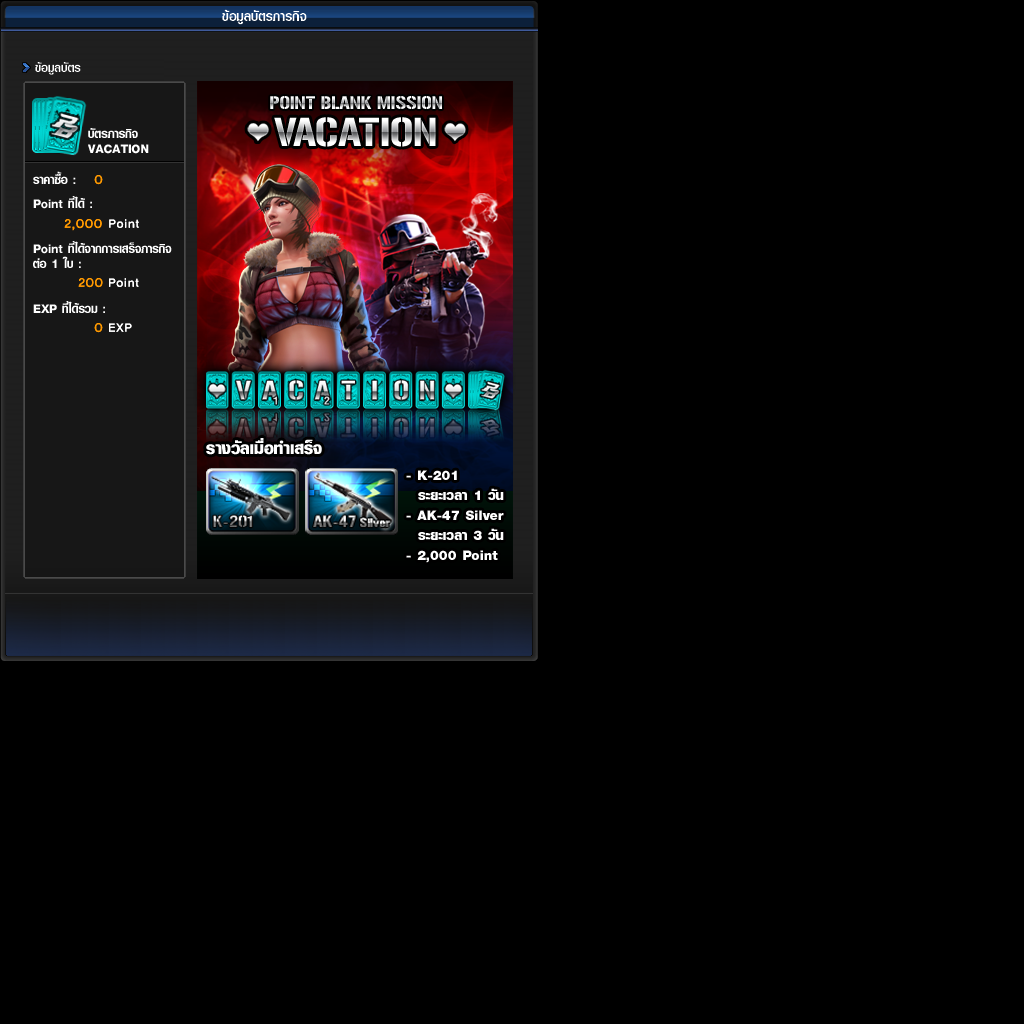
<style>
.page{position:relative;width:1024px;height:1024px;background:#000000}
.page>*{position:absolute;margin:0}
.t1{font:20px "PSL-EmpireExtraRegular";color:#ffffff}
.t2{font:18px "PSL-EmpireExtraRegular";color:#ffffff}
.t3{font:18px "Gunplay"}
.t4{font:40px "Gunplay"}
.t5{font:18px/15px "PSL-EmpireExtraRegular";color:#ffffff}
.t6{font:12px "YDIYGO240";color:#ff9900}
.t7{font:12px "YDIYGO240";color:#ffffff}
.t8{font:24px "PSL-EmpireExtraBold";color:#ffffff}
.t9{font:20px/20px "PSL-EmpireExtraBold";color:#ffffff}
</style>
<div class="page">
<p class="t1" style="left:222px;top:9px;width:85px;height:16px">¢ŒÍÁÙÅºÑµÃÀÒÃ¡Ô¨</p>
<p class="t2" style="left:35px;top:62px;width:46px;height:13px">¢ŒÍÁÙÅºÑµÃ</p>
<p class="t3" style="left:270px;top:96px;width:172px;height:13px">POINT BLANK MISSION</p>
<p class="t4" style="left:274px;top:117px;width:162px;height:30px">VACATION</p>
<p class="t5" style="left:88px;top:128px;width:61px;height:26px">ºÑµÃÀÒÃ¡Ô¨<br>VACATION</p>
<p class="t2" style="left:33px;top:171px;width:43px;height:13px">ÃÒ¤Ò«×éÍ :</p>
<p class="t6" style="left:94px;top:175px;width:9px;height:10px">0</p>
<p class="t2" style="left:33px;top:196px;width:59px;height:13px">Point ·Õèä´Œ :</p>
<p class="t6" style="left:64px;top:219px;width:38px;height:12px">2,000</p>
<p class="t7" style="left:109px;top:219px;width:30px;height:9px">Point</p>
<p class="t5" style="left:33px;top:241px;width:139px;height:27px">Point ·Õèä´Œ¨Ò¡¡ÒÃàÊÃç¨ÀÒÃ¡Ô¨<br>µ‹Í 1 ãº :</p>
<p class="t6" style="left:78px;top:278px;width:25px;height:10px">200</p>
<p class="t7" style="left:109px;top:278px;width:30px;height:9px">Point</p>
<p class="t2" style="left:33px;top:301px;width:72px;height:12px">EXP ·Õèä´ŒÃÇÁ :</p>
<p class="t6" style="left:94px;top:323px;width:9px;height:10px">0</p>
<p class="t7" style="left:109px;top:323px;width:23px;height:9px">EXP</p>
<p class="t8" style="left:206px;top:438px;width:116px;height:17px">ÃÒ§ÇÑÅàÁ×èÍ·ÓàÊÃç¨</p>
<p class="t9" style="left:406px;top:470px;width:98px;height:93px">- K-201<br>  ÃÐÂÐàÇÅÒ 1 ÇÑ¹<br>- AK-47 Silver<br>  ÃÐÂÐàÇÅÒ 3 ÇÑ¹<br>- 2,000 Point</p>
</div>
